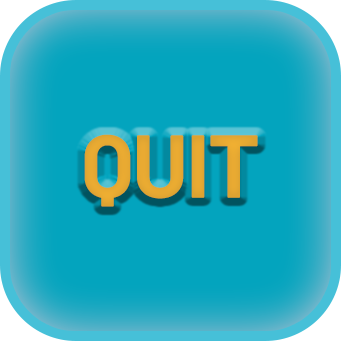
<style>
.page{position:relative;width:341px;height:341px;background:#03a4be}
.page>*{position:absolute;margin:0}
.t1{font:89.2px "Barlow-Bold";letter-spacing:-0.02em;color:#f7b432}
</style>
<div class="page">
<p class="t1" style="left:84px;top:134px;width:174px;height:73px">QUIT</p>
</div>
